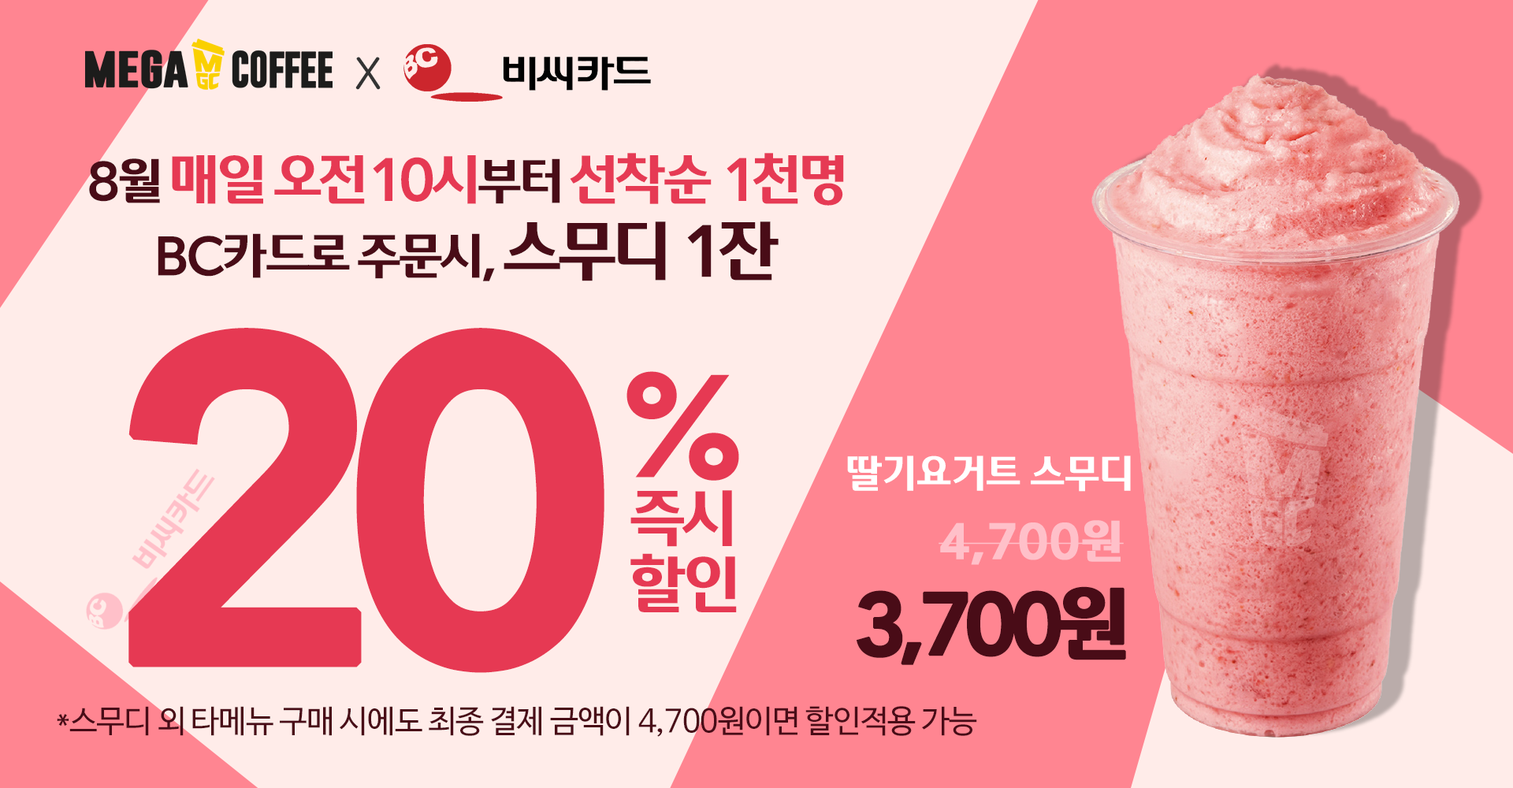
<style>
.page{position:relative;width:1513px;height:788px;background:#ffece9}
.page>*{position:absolute;margin:0}
.t1{font:57.8px "Gulim";color:#333333}
.t2{font:51.7px/75.3px "TTWelcomeBold";letter-spacing:-0.05em;color:#490c17}
.t3{font:51.7px/85.9px "TTWelcomeBold";letter-spacing:-0.05em;color:#490c17}
.t4{font:57px/85.9px "TTWelcomeBold";letter-spacing:-0.05em;color:#e63953}
.t5{font:57px/85.9px "TTWelcomeBold";letter-spacing:-0.05em;color:#e63a54}
.t6{font:68.9px/75.3px "TTWelcomeBold";letter-spacing:-0.05em;color:#490c17}
.t7{font:430.7px "TTWelcomeBold";letter-spacing:-0.12em;color:#e63953;font-weight:bold}
.t8{font:143.4px "TTWelcomeBold";color:#e63953}
.t9{font:41px "TTWelcomeBold";color:#ffffff}
.t10{font:65.6px/28px "TTWelcomeBold";letter-spacing:-0.05em;color:#e63953}
.t11{font:65.6px/38.9px "TTWelcomeBold";letter-spacing:-0.05em;color:#e63953}
.t12{font:47.4px "TTWelcomeBold";color:#ffc0c9;font-weight:bold}
.t13{font:82px "TTWelcomeBold";letter-spacing:-0.1em;color:#490c17;font-weight:bold}
.t14{font:31.5px "NanumBarunGothic";letter-spacing:-0.025em;color:#490c17}
</style>
<div class="page">
<p class="t1" style="left:355px;top:57px;width:26px;height:33px">x</p>
<p class="t2" style="left:89px;top:153px;width:755px;height:128px;text-align:center"><span class="t3">8월 </span><span class="t4">매일 오전10시</span><span class="t3">부터 </span><span class="t5">선착순 1천명<br></span>BC카드로 주문시, <span class="t6">스무디 1잔</span></p>
<p class="t7" style="left:128px;top:328px;width:476px;height:345px">20</p>
<p class="t8" style="left:627px;top:371px;width:112px;height:110px">%</p>
<p class="t9" style="left:847px;top:456px;width:284px;height:36px">딸기요거트 스무디</p>
<p class="t10" style="left:630px;top:490px;width:107px;height:122px;text-align:center">즉시<br><br><span class="t11">할인</span></p>
<p class="t12" style="left:939px;top:520px;width:185px;height:45px">4,700원</p>
<p class="t13" style="left:857px;top:586px;width:269px;height:79px">3,700원</p>
<p class="t14" style="left:57px;top:706px;width:920px;height:31px">*스무디 외 타메뉴 구매 시에도 최종 결제 금액이 4,700원이면 할인적용 가능</p>
</div>
